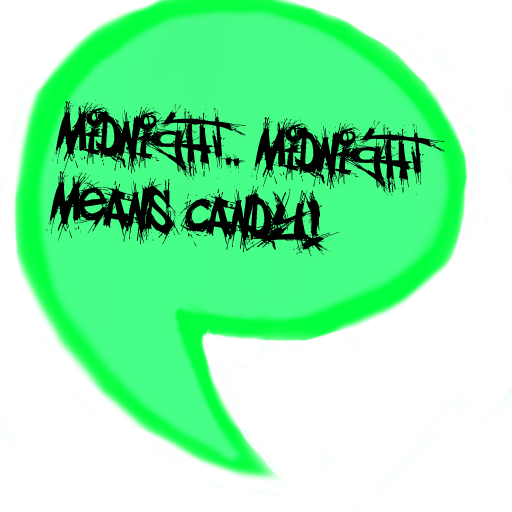
<style>
.page{position:relative;width:512px;height:512px;background:#ffffff}
.page>*{position:absolute;margin:0}
.t1{font:58.3px "el&fontgohtic!";color:#000000}
</style>
<div class="page">
<p class="t1" style="left:46px;top:99px;width:399px;height:158px;rotate:5deg">Midnight.. midnight means candY!</p>
</div>
